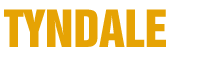
<style>
.page{position:relative;width:200px;height:57px;background:#ffffff}
.page>*{position:absolute;margin:0}
.t1{font:46.8px "Swiss921BT-RegularA";color:#e6a304}
</style>
<div class="page">
<p class="t1" style="left:4px;top:9px;width:162px;height:38px">TYNDALE</p>
</div>
